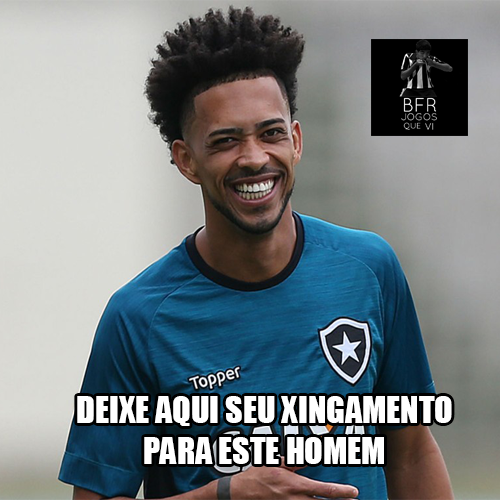
<style>
.page{position:relative;width:500px;height:500px}
.page>*{position:absolute;margin:0}
.t1{font:34px "Impact";color:#ffffff}
</style>
<div class="page">
<p class="t1" style="left:77px;top:396px;width:375px;height:68px;text-align:center">DEIXE AQUI SEU XINGAMENTO <br>PARA ESTE HOMEM</p>
</div>
